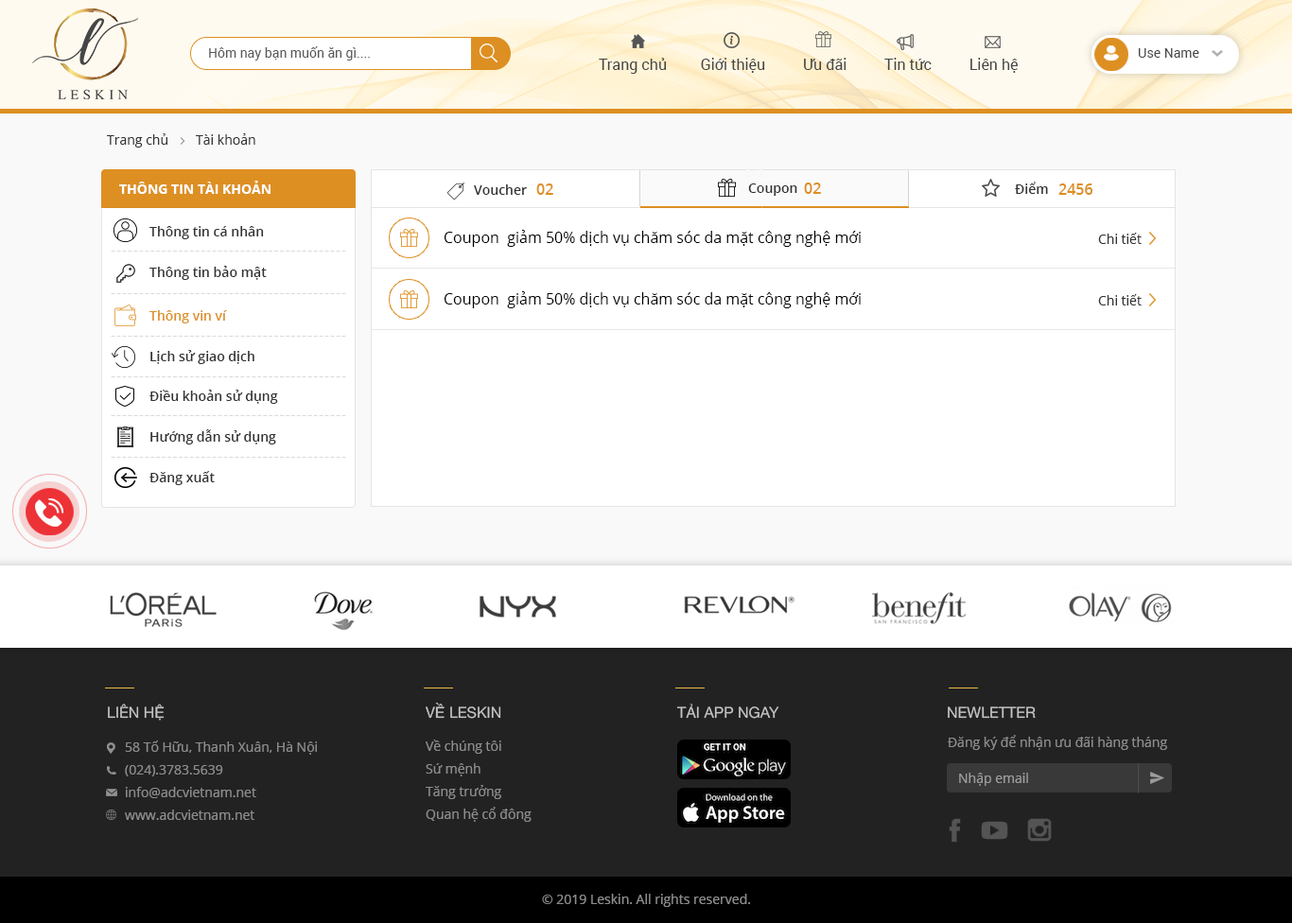
<style>
.page{position:relative;width:1292px;height:923px;background:#ffffff}
.page>*{position:absolute;margin:0}
.t1{font:13.2px "Roboto-Regular";color:#595959}
.t2{font:13.2px "Roboto-Regular";color:#464646}
.t3{font:15.1px "Roboto-Regular";color:#464646}
.t4{font:13.2px "OpenSans";color:#333333}
.t5{font:13.2px "OpenSans-Bold";color:#ffffff;text-transform:uppercase}
.t6{font:13.2px "OpenSans-Semibold";color:#333333}
.t7{font:15.1px "OpenSans-Semibold";color:#dd8f22}
.t8{font:15.1px "OpenSans";color:#000000}
.t9{font:15.1px "OpenSans-Light";letter-spacing:0.05em;color:#d9d9d9}
.t10{font:13.2px "OpenSans-Semibold";color:#dd8f22}
.t11{font:15.1px "HelveticaNeue";color:#c4c4c4;text-transform:uppercase}
.t12{font:13.2px "OpenSans";color:#8c8c8c}
.t13{font:13.2px/22.7px "OpenSans";color:#8c8c8c}
.t14{font:13.2px "OpenSans";color:#9c9c9c}
</style>
<div class="page">
<p class="t1" style="left:209px;top:46px;width:161px;height:15px">Hôm nay bạn muốn ăn gì....</p>
<p class="t2" style="left:1138px;top:48px;width:61px;height:10px">Use Name</p>
<p class="t3" style="left:599px;top:58px;width:419px;height:16px">Trang chủ         Giới thiệu          Ưu đãi          Tin tức          Liên hệ</p>
<p class="t4" style="left:107px;top:133px;width:148px;height:15px">Trang chủ        Tài khoản</p>
<p class="t5" style="left:119px;top:181px;width:151px;height:13px">Thông tin tài khoản</p>
<p class="t6" style="left:474px;top:184px;width:53px;height:11px">Voucher</p>
<p class="t7" style="left:536px;top:183px;width:17px;height:12px">02</p>
<p class="t6" style="left:748px;top:183px;width:49px;height:13px">Coupon</p>
<p class="t7" style="left:804px;top:183px;width:17px;height:11px">02</p>
<p class="t6" style="left:1015px;top:182px;width:33px;height:12px">Điểm</p>
<p class="t7" style="left:1058px;top:183px;width:35px;height:12px">2456</p>
<p class="t6" style="left:149px;top:226px;width:115px;height:13px">Thông tin cá nhân</p>
<p class="t8" style="left:444px;top:230px;width:417px;height:17px">Coupon  giảm 50% dịch vụ chăm sóc da mặt công nghệ mới</p>
<p class="t4" style="left:1098px;top:233px;width:43px;height:11px">Chi tiết</p>
<p class="t9" style="left:111px;top:251px;width:235px;height:1px">------------------------------------------</p>
<p class="t6" style="left:149px;top:266px;width:118px;height:14px">Thông tin bảo mật</p>
<p class="t9" style="left:111px;top:293px;width:235px;height:1px">------------------------------------------</p>
<p class="t8" style="left:444px;top:291px;width:417px;height:17px">Coupon  giảm 50% dịch vụ chăm sóc da mặt công nghệ mới</p>
<p class="t4" style="left:1098px;top:294px;width:43px;height:11px">Chi tiết</p>
<p class="t10" style="left:149px;top:310px;width:78px;height:13px">Thông vin ví</p>
<p class="t9" style="left:111px;top:336px;width:235px;height:1px">------------------------------------------</p>
<p class="t6" style="left:150px;top:350px;width:104px;height:14px">Lịch sử giao dịch</p>
<p class="t9" style="left:111px;top:376px;width:235px;height:1px">------------------------------------------</p>
<p class="t6" style="left:149px;top:390px;width:129px;height:14px">Điều khoản sử dụng</p>
<p class="t9" style="left:111px;top:415px;width:235px;height:1px">------------------------------------------</p>
<p class="t6" style="left:150px;top:429px;width:126px;height:15px">Hướng dẫn sử dụng</p>
<p class="t9" style="left:111px;top:457px;width:235px;height:1px">------------------------------------------</p>
<p class="t6" style="left:149px;top:471px;width:66px;height:14px">Đăng xuất</p>
<p class="t11" style="left:426px;top:702px;width:75px;height:17px">về leskin</p>
<p class="t11" style="left:108px;top:704px;width:57px;height:17px">Liên hệ</p>
<p class="t11" style="left:677px;top:704px;width:102px;height:15px">Tải App ngay</p>
<p class="t11" style="left:948px;top:706px;width:88px;height:13px">newletter</p>
<p class="t12" style="left:948px;top:735px;width:219px;height:15px">Đăng ký để nhận ưu đãi hàng tháng</p>
<p class="t13" style="left:125px;top:741px;width:192px;height:79px">58 Tố Hữu, Thanh Xuân, Hà Nội<br>(024).3783.5639<br>info@adcvietnam.net <br>www.adcvietnam.net</p>
<p class="t13" style="left:426px;top:740px;width:105px;height:82px">Về chúng tôi<br>Sứ mệnh<br>Tăng trưởng<br>Quan hệ cổ đông</p>
<p class="t14" style="left:959px;top:773px;width:69px;height:13px">Nhập email</p>
<p class="t12" style="left:542px;top:894px;width:208px;height:13px">© 2019 Leskin. All rights reserved.</p>
</div>
